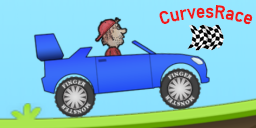
<style>
.page{position:relative;width:256px;height:128px}
.page>*{position:absolute;margin:0}
.t1{font:18.7px "Bahnschrift-SemiCondensed";color:#f11a1a}
</style>
<div class="page">
<p class="t1" style="left:159px;top:5px;width:94px;height:20px">CurvesRace</p>
</div>
